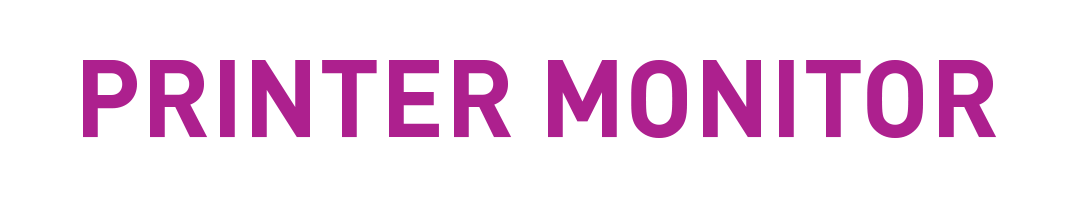
<style>
.page{position:relative;width:1080px;height:200px;background:#ffffff}
.page>*{position:absolute;margin:0}
.t1{font:106.7px "DIN-Bold";color:#ad208e}
</style>
<div class="page">
<p class="t1" style="left:83px;top:60px;width:914px;height:78px">PRINTER MONITOR</p>
</div>
